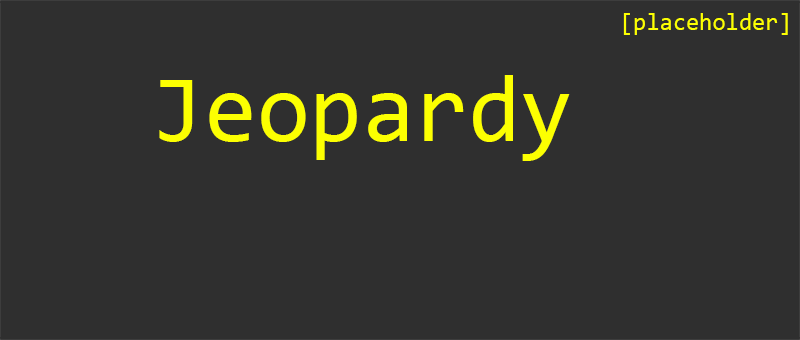
<style>
.page{position:relative;width:800px;height:340px;background:#2f2f2f}
.page>*{position:absolute;margin:0}
.t1{font:24px "Consolas";color:#fcff01}
.t2{font:96px "Consolas";color:#fcff01}
</style>
<div class="page">
<p class="t1" style="left:623px;top:13px;width:165px;height:22px">[placeholder]</p>
<p class="t2" style="left:159px;top:75px;width:411px;height:86px">Jeopardy</p>
</div>
